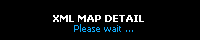
<style>
.page{position:relative;width:200px;height:40px;background:#000000}
.page>*{position:absolute;margin:0}
.t1{font:10px "Tahoma-Bold";color:#ffffff}
.t2{font:9px "Tahoma";color:#10a8f7}
</style>
<div class="page">
<p class="t1" style="left:53px;top:15px;width:91px;height:7px">XML MAP DETAIL</p>
<p class="t2" style="left:74px;top:24px;width:59px;height:8px">Please wait ...</p>
</div>
